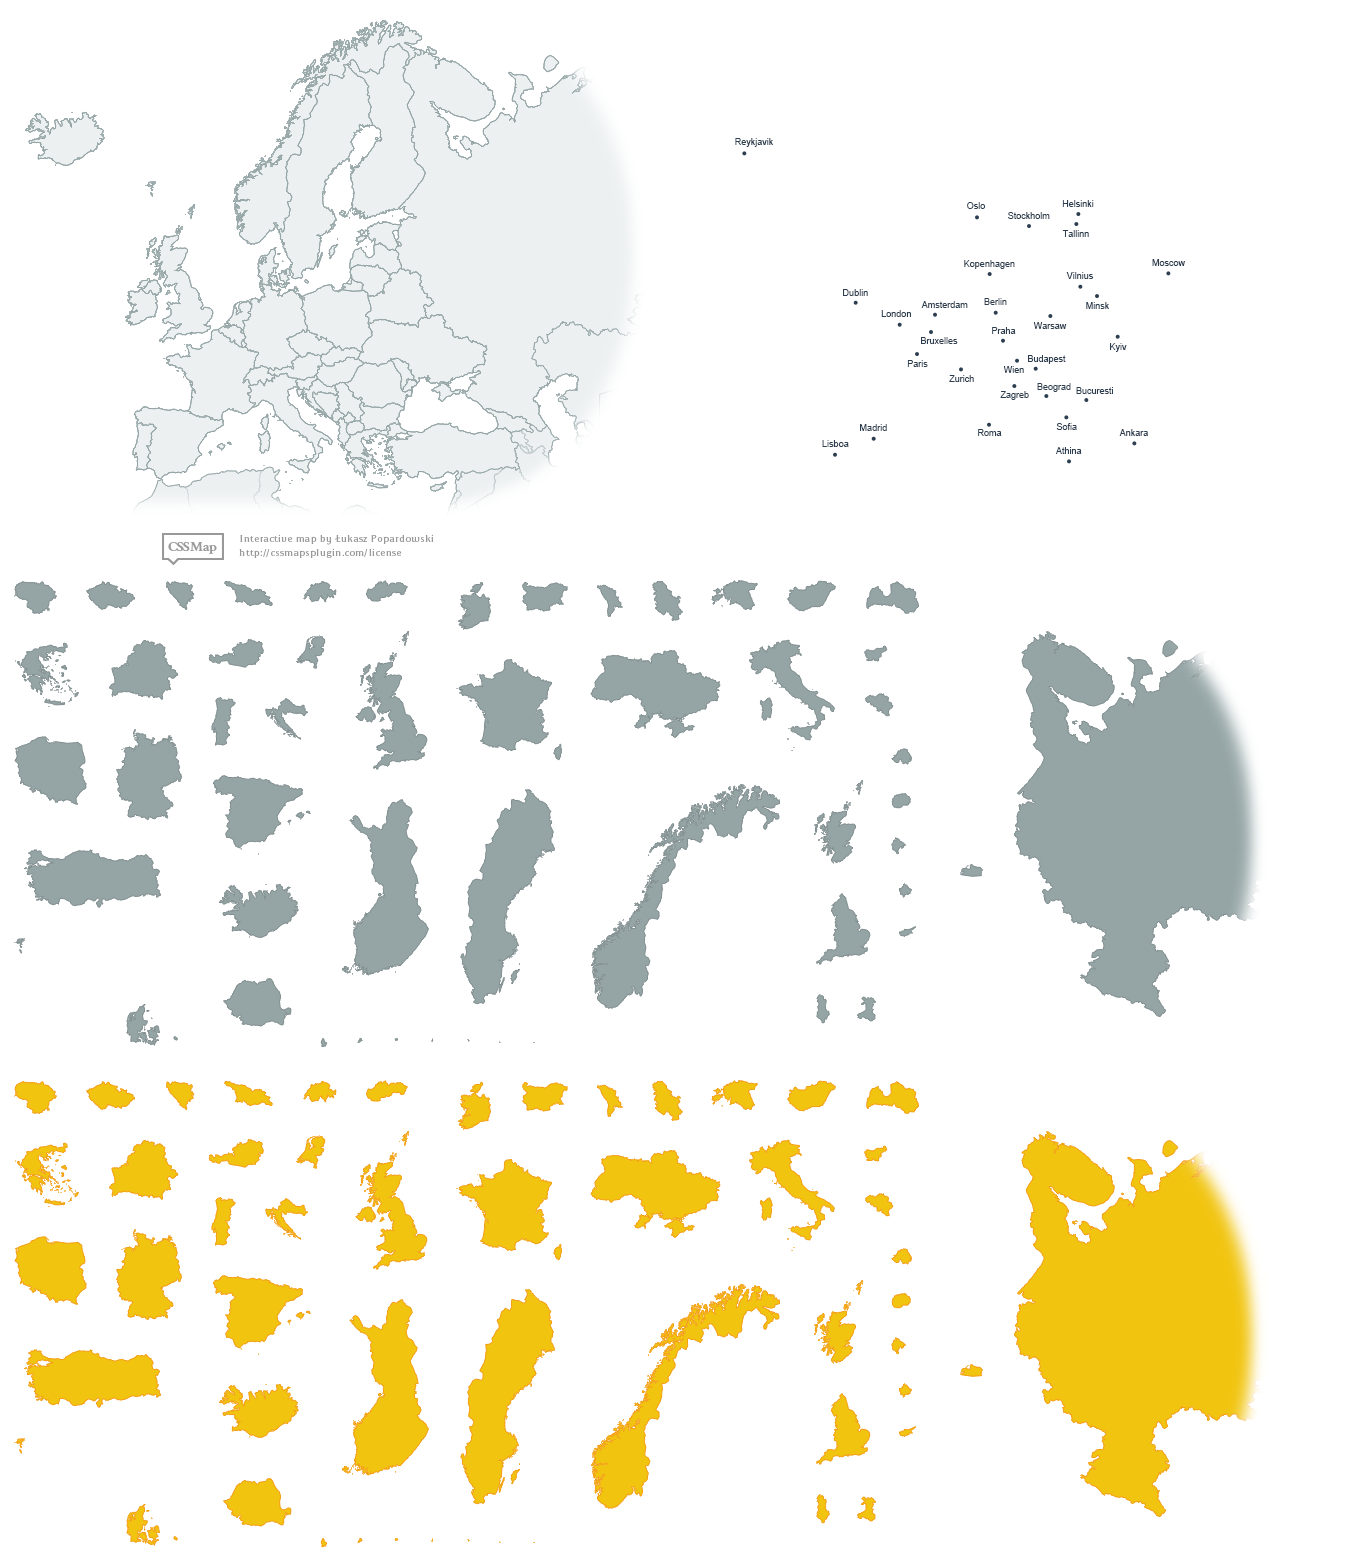
<style>
.page{position:relative;width:1352px;height:1562px;background:#ffffff}
.page>*{position:absolute;margin:0}
.t1{font:9px "ArialMT";color:#2c3e50}
</style>
<div class="page">
<p class="t1" style="left:735px;top:138px;width:38px;height:9px">Reykjavik</p>
<p class="t1" style="left:967px;top:202px;width:18px;height:7px">Oslo</p>
<p class="t1" style="left:1062px;top:200px;width:32px;height:7px">Helsinki</p>
<p class="t1" style="left:1008px;top:212px;width:42px;height:7px">Stockholm</p>
<p class="t1" style="left:1062px;top:230px;width:27px;height:7px">Tallinn</p>
<p class="t1" style="left:964px;top:260px;width:51px;height:9px">Kopenhagen</p>
<p class="t1" style="left:1152px;top:259px;width:33px;height:7px">Moscow</p>
<p class="t1" style="left:1066px;top:272px;width:28px;height:7px">Vilnius</p>
<p class="t1" style="left:843px;top:289px;width:25px;height:7px">Dublin</p>
<p class="t1" style="left:921px;top:301px;width:47px;height:7px">Amsterdam</p>
<p class="t1" style="left:984px;top:298px;width:23px;height:7px">Berlin</p>
<p class="t1" style="left:1086px;top:302px;width:23px;height:7px">Minsk</p>
<p class="t1" style="left:881px;top:310px;width:30px;height:7px">London</p>
<p class="t1" style="left:992px;top:327px;width:24px;height:7px">Praha</p>
<p class="t1" style="left:1033px;top:322px;width:34px;height:7px">Warsaw</p>
<p class="t1" style="left:921px;top:337px;width:37px;height:7px">Bruxelles</p>
<p class="t1" style="left:1110px;top:343px;width:17px;height:9px">Kyiv</p>
<p class="t1" style="left:907px;top:360px;width:21px;height:7px">Paris</p>
<p class="t1" style="left:1003px;top:366px;width:21px;height:7px">Wien</p>
<p class="t1" style="left:1028px;top:355px;width:38px;height:9px">Budapest</p>
<p class="t1" style="left:949px;top:375px;width:25px;height:7px">Zurich</p>
<p class="t1" style="left:1037px;top:383px;width:34px;height:9px">Beograd</p>
<p class="t1" style="left:1076px;top:387px;width:37px;height:7px">Bucuresti</p>
<p class="t1" style="left:1000px;top:391px;width:29px;height:9px">Zagreb</p>
<p class="t1" style="left:860px;top:424px;width:27px;height:7px">Madrid</p>
<p class="t1" style="left:1056px;top:423px;width:21px;height:7px">Sofia</p>
<p class="t1" style="left:978px;top:429px;width:24px;height:7px">Roma</p>
<p class="t1" style="left:1119px;top:429px;width:29px;height:7px">Ankara</p>
<p class="t1" style="left:822px;top:440px;width:27px;height:7px">Lisboa</p>
<p class="t1" style="left:1055px;top:447px;width:27px;height:7px">Athina</p>
</div>
